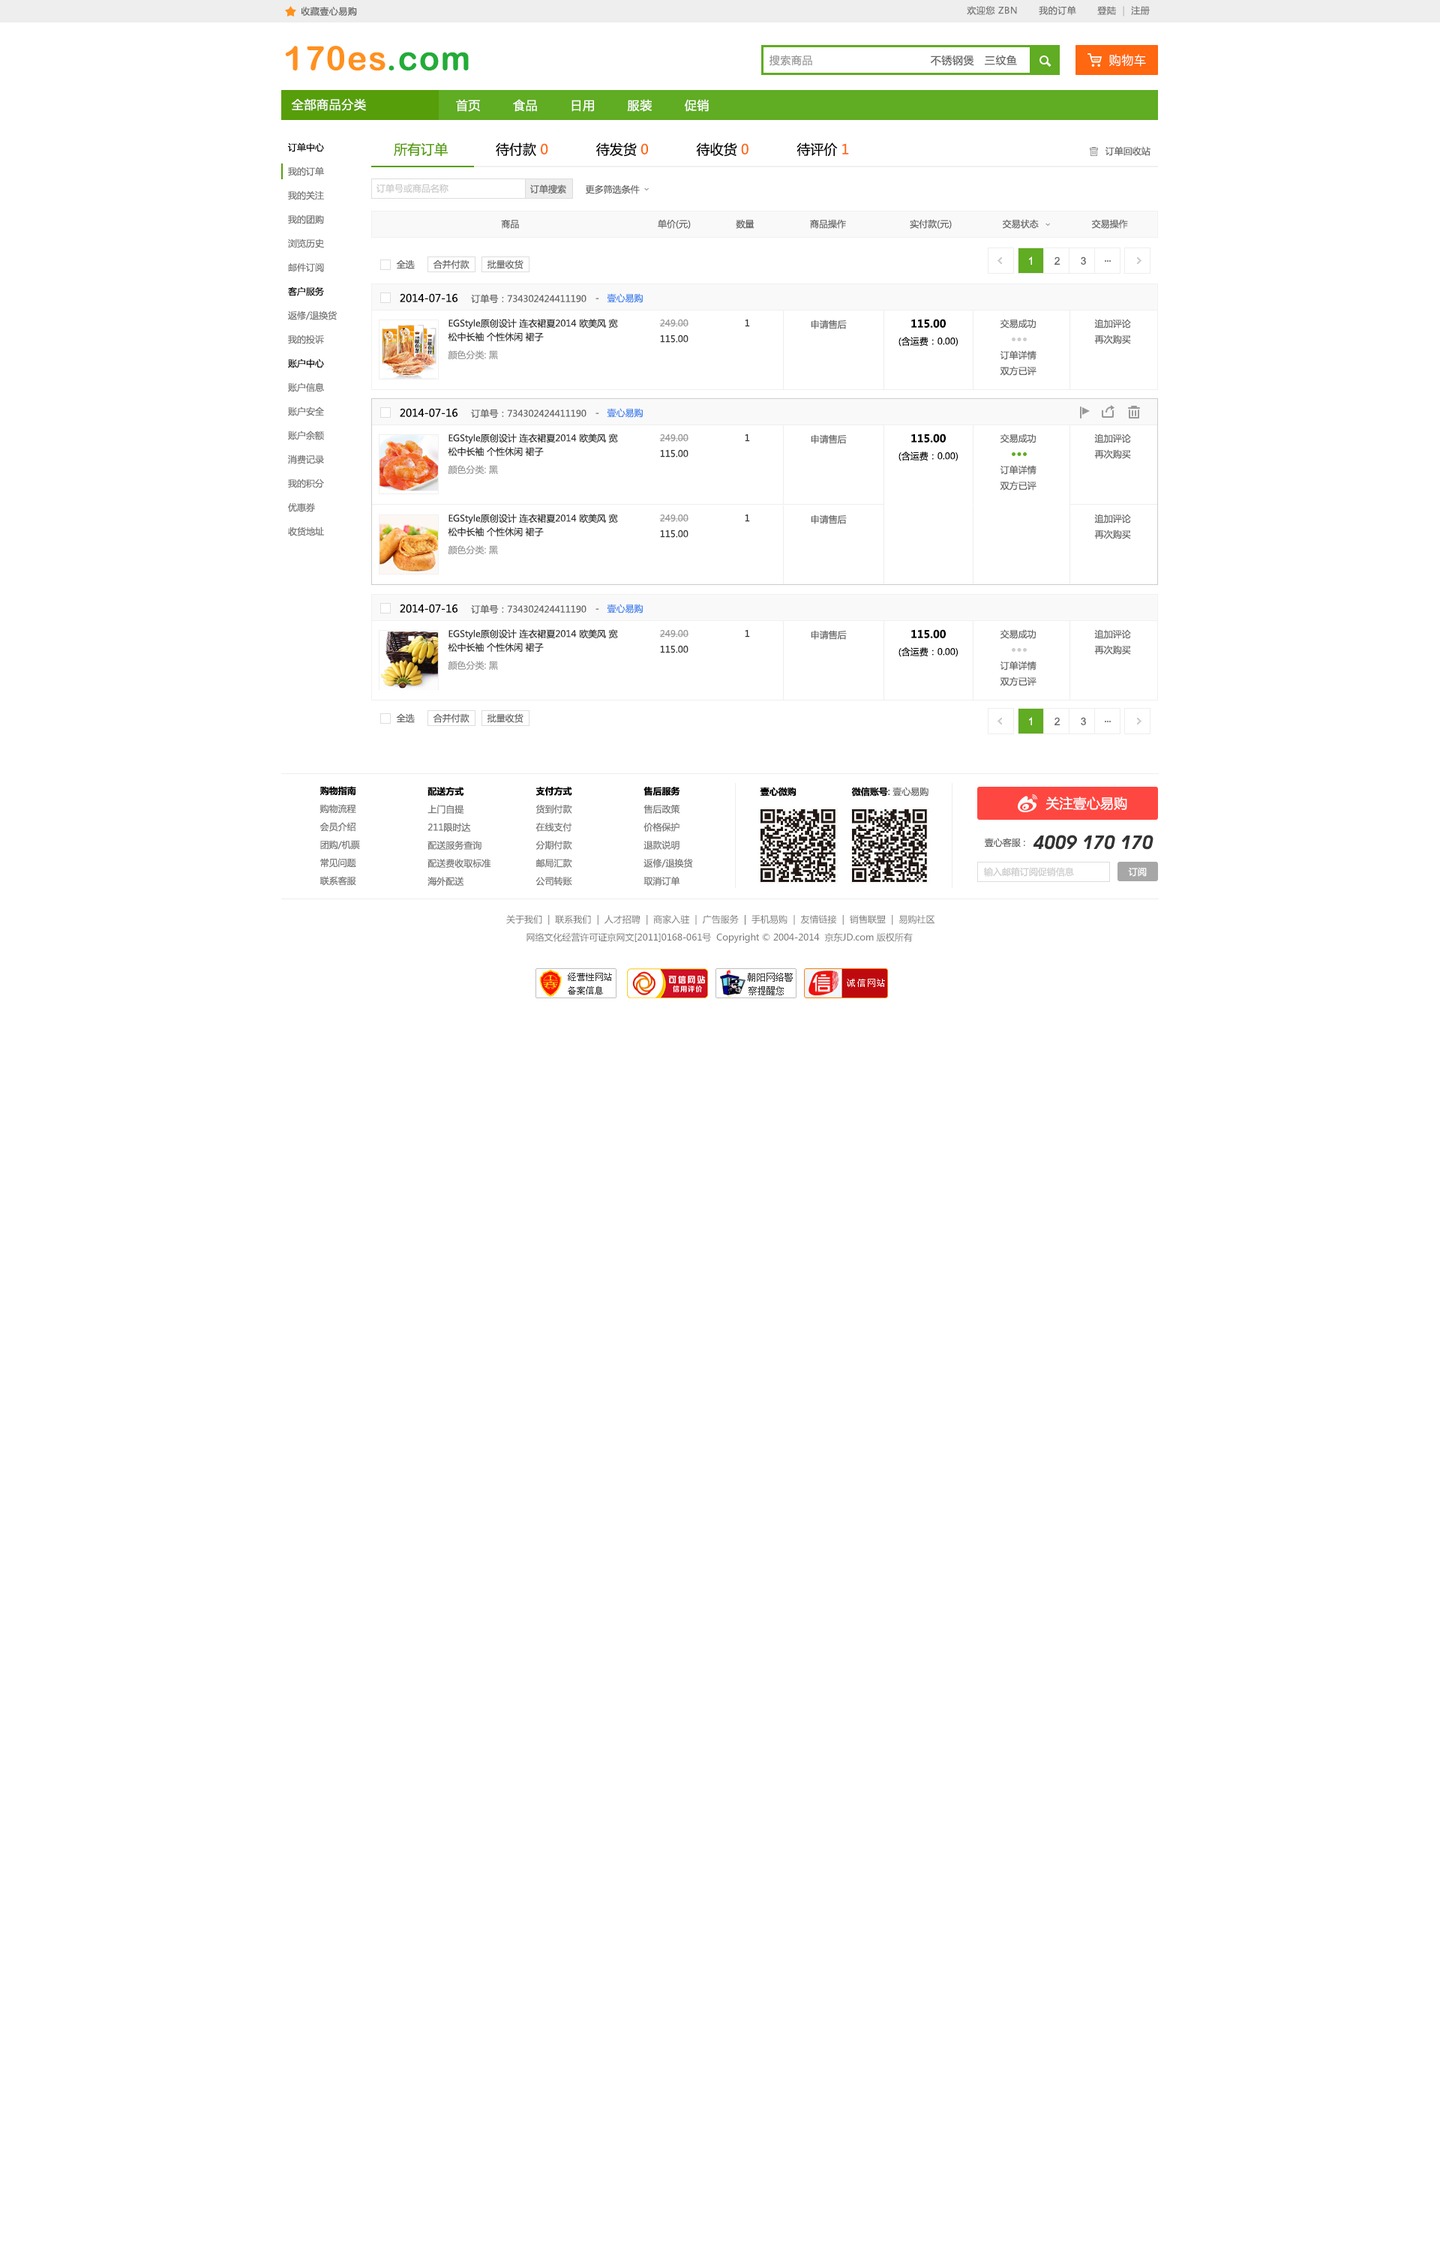
<style>
.page{position:relative;width:1440px;height:2250px;background:#ffffff}
.page>*{position:absolute;margin:0}
.t1{font:9px "MicrosoftYaHei";letter-spacing:0.04em;color:#787878}
.t2{font:9px "MicrosoftYaHei";letter-spacing:0.04em;color:#bbbbbb}
.t3{font:9px "MicrosoftYaHei";letter-spacing:0.04em;color:#666666}
.t4{font:33.5px "ArialRoundedMTBold";letter-spacing:0.04em;color:#ff911d}
.t5{font:33.5px "ArialRoundedMTBold";letter-spacing:0.04em;color:#22ac38}
.t6{font:12px "MicrosoftYaHei";letter-spacing:0.04em;color:#ffffff}
.t7{font:10.5px "MicrosoftYaHei";letter-spacing:0.04em;color:#999999}
.t8{font:10.5px "MicrosoftYaHei";letter-spacing:0.04em;color:#666666}
.t9{font:9px/24px "MicrosoftYaHei";color:#777777}
.t10{font:9px/24px "MicrosoftYaHei";color:#000000}
.t11{font:13.5px "MicrosoftYaHei";color:#579e0b}
.t12{font:13.5px "MicrosoftYaHei";color:#000000}
.t13{font:13.5px "MicrosoftYaHei";color:#ff6710}
.t14{font:9px "MicrosoftYaHei";color:#666666}
.t15{font:9px "MicrosoftYaHei";color:#cccccc}
.t16{font:10.5px "ArialMT";color:#666666}
.t17{font:10.5px "ArialMT";color:#ffffff}
.t18{font:10.5px "MicrosoftYaHei";color:#000000}
.t19{font:9px "MicrosoftYaHei";color:#4787ed}
.t20{font:9px/13.5px "MicrosoftYaHei";color:#333333}
.t21{font:9px "MicrosoftYaHei";color:#999999}
.t22{font:9px "MicrosoftYaHei";color:#333333}
.t23{font:9px "MicrosoftYaHei";color:#000000}
.t24{font:10.5px "MicrosoftYaHeiBold";color:#000000}
.t25{font:9px/18px "MicrosoftYaHei";color:#787878}
.t26{font:9px/18px "MicrosoftYaHeiBold";color:#000000}
.t27{font:9px "MicrosoftYaHeiBold";color:#000000}
.t28{font:13.5px "MicrosoftYaHei";color:#ffffff}
.t29{font:18.7px "AvantGardeITCbyBT-DemiOblique";color:#333333}
.t30{font:9px "MicrosoftYaHei";color:#ffffff}
.t31{font:9px "MicrosoftYaHei";color:#787878}
</style>
<div class="page">
<p class="t1" style="left:967px;top:6px;width:183px;height:10px">欢迎您 ZBN       我的订单       登陆  <span class="t2">|</span>  注册</p>
<p class="t3" style="left:301px;top:7px;width:56px;height:9px">收藏壹心易购</p>
<p class="t4" style="left:285px;top:46px;width:184px;height:24px">170es<span class="t5">.com</span></p>
<p class="t6" style="left:1109px;top:54px;width:37px;height:13px">购物车</p>
<p class="t7" style="left:770px;top:55px;width:42px;height:11px">搜索商品</p>
<p class="t8" style="left:930px;top:55px;width:44px;height:11px">不锈钢煲</p>
<p class="t8" style="left:985px;top:55px;width:32px;height:11px">三纹鱼</p>
<p class="t6" style="left:291px;top:98px;width:75px;height:13px">全部商品分类</p>
<p class="t6" style="left:456px;top:99px;width:253px;height:13px">首页        食品        日用        服装        促销</p>
<p class="t9" style="left:288px;top:142px;width:49px;height:394px"><span class="t10">订单中心</span><br>我的订单<br>我的关注<br>我的团购<br>浏览历史<br>邮件订阅<br><span class="t10">客户服务</span><br>返修/退换货<br>我的投诉<br><span class="t10">账户中心</span><br>账户信息<br>账户安全<br>账户余额<br>消费记录<br>我的积分<br>优惠券<br>收货地址</p>
<p class="t11" style="left:394px;top:142px;width:455px;height:15px">所有订单<span class="t12">            待付款 </span><span class="t13">0      </span><span class="t12">      待发货 </span><span class="t13">0 </span><span class="t12">           待收货 </span><span class="t13">0</span><span class="t12">            待评价 </span><span class="t13">1</span></p>
<p class="t14" style="left:1105px;top:146px;width:45px;height:10px">订单回收站</p>
<p class="t15" style="left:376px;top:184px;width:72px;height:10px">订单号或商品名称</p>
<p class="t14" style="left:530px;top:184px;width:36px;height:10px">订单搜索</p>
<p class="t14" style="left:585px;top:184px;width:55px;height:10px">更多筛选条件</p>
<p class="t14" style="left:501px;top:219px;width:627px;height:10px">商品                                                    单价(元)                 数量                     商品操作                        实付款(元)                   交易状态                    交易操作</p>
<p class="t16" style="left:1029px;top:256px;width:57px;height:9px"><span class="t17">1</span>       2       3</p>
<p class="t14" style="left:396px;top:260px;width:19px;height:9px">全选</p>
<p class="t14" style="left:433px;top:260px;width:37px;height:9px">合并付款</p>
<p class="t14" style="left:487px;top:260px;width:37px;height:9px">批量收货</p>
<p class="t14" style="left:400px;top:293px;width:186px;height:11px"><span class="t18">2014-07-16</span>     订单号：734302424411190</p>
<p class="t19" style="left:596px;top:293px;width:47px;height:10px"><span class="t14">-   </span>壹心易购</p>
<p class="t20" style="left:448px;top:319px;width:170px;height:23px">EGStyle原创设计 连衣裙夏2014 欧美风 宽松中长袖 个性休闲 裙子</p>
<p class="t21" style="left:659px;top:319px;width:29px;height:24px">249.00<br><span class="t22">115.00</span></p>
<p class="t22" style="left:745px;top:319px;width:5px;height:8px">1</p>
<p class="t14" style="left:811px;top:320px;width:36px;height:9px">申请售后</p>
<p class="t23" style="left:898px;top:319px;width:60px;height:27px;text-align:center"><span class="t24">115.00<br></span>(含运费：0.00)</p>
<p class="t14" style="left:1000px;top:319px;width:36px;height:57px">交易成功<br><br>订单详情<br>双方已评</p>
<p class="t14" style="left:1094px;top:319px;width:37px;height:25px">追加评论<br>再次购买</p>
<p class="t21" style="left:448px;top:350px;width:50px;height:10px">颜色分类: 黑</p>
<p class="t14" style="left:400px;top:408px;width:186px;height:10px"><span class="t18">2014-07-16</span>     订单号：734302424411190</p>
<p class="t19" style="left:596px;top:408px;width:47px;height:10px"><span class="t14">-   </span>壹心易购</p>
<p class="t20" style="left:448px;top:434px;width:170px;height:23px">EGStyle原创设计 连衣裙夏2014 欧美风 宽松中长袖 个性休闲 裙子</p>
<p class="t21" style="left:659px;top:434px;width:29px;height:24px">249.00<br><span class="t22">115.00</span></p>
<p class="t22" style="left:745px;top:434px;width:5px;height:8px">1</p>
<p class="t14" style="left:811px;top:434px;width:36px;height:10px">申请售后</p>
<p class="t23" style="left:898px;top:434px;width:60px;height:27px;text-align:center"><span class="t24">115.00<br></span>(含运费：0.00)</p>
<p class="t14" style="left:1000px;top:434px;width:36px;height:56px">交易成功<br><br>订单详情<br>双方已评</p>
<p class="t14" style="left:1094px;top:434px;width:37px;height:25px">追加评论<br>再次购买</p>
<p class="t21" style="left:448px;top:465px;width:50px;height:10px">颜色分类: 黑</p>
<p class="t20" style="left:448px;top:514px;width:170px;height:23px">EGStyle原创设计 连衣裙夏2014 欧美风 宽松中长袖 个性休闲 裙子</p>
<p class="t21" style="left:659px;top:514px;width:29px;height:24px">249.00<br><span class="t22">115.00</span></p>
<p class="t22" style="left:745px;top:514px;width:5px;height:8px">1</p>
<p class="t14" style="left:811px;top:514px;width:36px;height:10px">申请售后</p>
<p class="t14" style="left:1094px;top:514px;width:37px;height:25px">追加评论<br>再次购买</p>
<p class="t21" style="left:448px;top:545px;width:50px;height:10px">颜色分类: 黑</p>
<p class="t14" style="left:400px;top:604px;width:186px;height:10px"><span class="t18">2014-07-16</span>     订单号：734302424411190</p>
<p class="t19" style="left:596px;top:604px;width:47px;height:10px"><span class="t14">-   </span>壹心易购</p>
<p class="t20" style="left:448px;top:629px;width:170px;height:23px">EGStyle原创设计 连衣裙夏2014 欧美风 宽松中长袖 个性休闲 裙子</p>
<p class="t21" style="left:659px;top:629px;width:29px;height:24px">249.00<br><span class="t22">115.00</span></p>
<p class="t22" style="left:745px;top:629px;width:5px;height:9px">1</p>
<p class="t14" style="left:811px;top:630px;width:36px;height:10px">申请售后</p>
<p class="t23" style="left:898px;top:629px;width:60px;height:28px;text-align:center"><span class="t24">115.00<br></span>(含运费：0.00)</p>
<p class="t14" style="left:1000px;top:629px;width:36px;height:57px">交易成功<br><br>订单详情<br>双方已评</p>
<p class="t14" style="left:1094px;top:629px;width:37px;height:26px">追加评论<br>再次购买</p>
<p class="t21" style="left:448px;top:661px;width:50px;height:9px">颜色分类: 黑</p>
<p class="t14" style="left:396px;top:713px;width:19px;height:10px">全选</p>
<p class="t14" style="left:433px;top:713px;width:37px;height:10px">合并付款</p>
<p class="t14" style="left:487px;top:713px;width:37px;height:10px">批量收货</p>
<p class="t16" style="left:1029px;top:717px;width:57px;height:8px"><span class="t17">1</span>       2       3</p>
<p class="t25" style="left:320px;top:786px;width:40px;height:100px"><span class="t26">购物指南<br></span>购物流程<br>会员介绍<br>团购/机票<br>常见问题<br>联系客服</p>
<p class="t25" style="left:428px;top:787px;width:63px;height:99px"><span class="t26">配送方式<br></span>上门自提<br>211限时达<br>配送服务查询<br>配送费收取标准<br>海外配送</p>
<p class="t25" style="left:536px;top:786px;width:36px;height:100px"><span class="t26">支付方式<br></span>货到付款<br>在线支付<br>分期付款<br>邮局汇款<br>公司转账</p>
<p class="t25" style="left:644px;top:786px;width:49px;height:100px"><span class="t26">售后服务<br></span>售后政策<br>价格保护<br>退款说明<br>返修/退换货<br>取消订单</p>
<p class="t27" style="left:760px;top:787px;width:36px;height:9px">壹心微购</p>
<p class="t27" style="left:851px;top:787px;width:77px;height:9px">微信账号<span class="t23">: </span><span class="t14">壹心易购</span></p>
<p class="t28" style="left:1046px;top:796px;width:81px;height:15px">关注壹心易购</p>
<p class="t14" style="left:985px;top:838px;width:40px;height:10px">壹心客服 :</p>
<p class="t29" style="left:1033px;top:835px;width:121px;height:15px">4009 170 170</p>
<p class="t15" style="left:984px;top:867px;width:90px;height:10px">输入邮箱订阅促销信息</p>
<p class="t30" style="left:1128px;top:867px;width:19px;height:10px">订阅</p>
<p class="t31" style="left:506px;top:914px;width:428px;height:11px">关于我们  |  联系我们  |  人才招聘  |  商家入驻  |  广告服务  |  手机易购  |  友情链接  |  销售联盟  |  易购社区</p>
<p class="t31" style="left:526px;top:932px;width:387px;height:11px">网络文化经营许可证京网文[2011]0168-061号  Copyright © 2004-2014  京东JD.com 版权所有</p>
</div>
